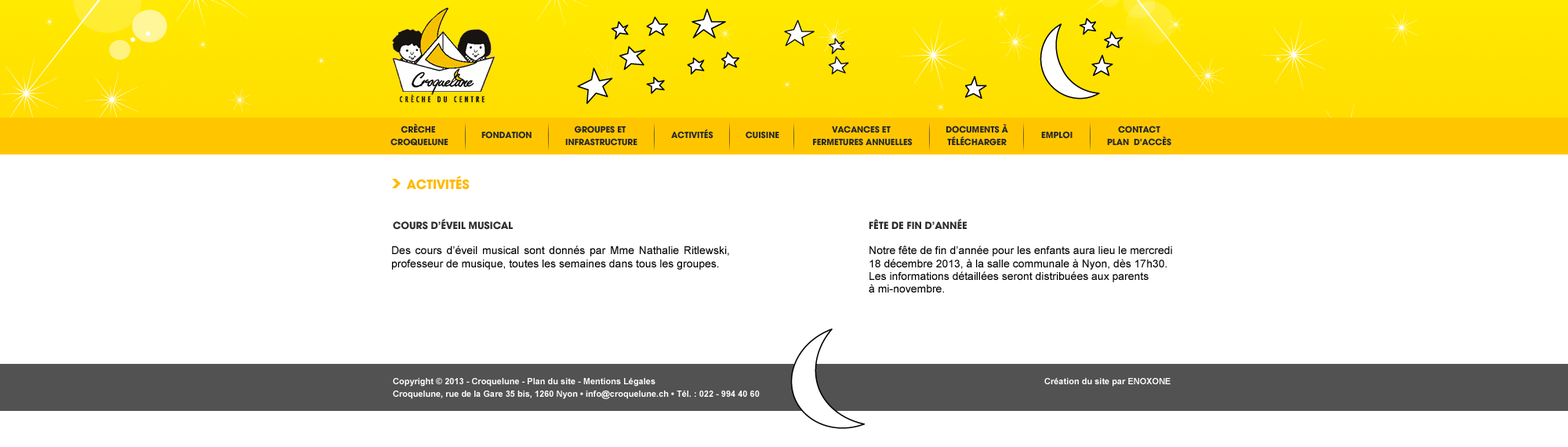
<style>
.page{position:relative;width:1568px;height:447px;background:#ffffff}
.page>*{position:absolute;margin:0}
.t1{font:9.4px/12.7px "AvantGard-Bold";color:#2a2a2a;text-transform:uppercase}
.t2{font:9.4px "AvantGard-Bold";color:#2a2a2a;text-transform:uppercase}
.t3{font:14.1px "AvantGard-Bold";color:#ffb900;text-transform:uppercase}
.t4{font:11px "AvantGard-Bold";color:#2f2f2f;text-transform:uppercase}
.t5{font:11px/12.7px "ArialMT";color:#000000}
.t6{font:8.6px/12.7px "Arial-BoldMT";color:#ffffff}
</style>
<div class="page">
<p class="t1" style="left:390px;top:123px;width:58px;height:23px;text-align:center">Crèche <br>Croquelune</p>
<p class="t1" style="left:565px;top:125px;width:72px;height:21px;text-align:center">Groupes et <br>infrastructure</p>
<p class="t1" style="left:813px;top:125px;width:100px;height:21px;text-align:center">Vacances et <br>fermetures annuelles</p>
<p class="t1" style="left:946px;top:124px;width:62px;height:22px;text-align:center">DOCUMENTs à<br>télécharger</p>
<p class="t1" style="left:1107px;top:125px;width:64px;height:21px;text-align:center">Contact<br>Plan  d'accès</p>
<p class="t2" style="left:481px;top:131px;width:51px;height:8px">Fondation</p>
<p class="t2" style="left:671px;top:129px;width:42px;height:10px">ACTIVITés</p>
<p class="t2" style="left:746px;top:131px;width:33px;height:8px">Cuisine</p>
<p class="t2" style="left:1041px;top:131px;width:32px;height:8px">Emploi</p>
<p class="t3" style="left:406px;top:176px;width:64px;height:14px">ACTIVITés</p>
<p class="t4" style="left:393px;top:219px;width:120px;height:11px">COURS D’ÉVEIL MUSICAL</p>
<p class="t4" style="left:869px;top:219px;width:98px;height:10px">FÊTE DE FIN D’ANNÉE</p>
<p class="t5" style="left:392px;top:245px;width:337px;height:25px;text-align:justify">Des cours d’éveil musical sont donnés par Mme Nathalie Ritlewski, professeur de musique, toutes les semaines dans tous les groupes.</p>
<p class="t5" style="left:869px;top:245px;width:303px;height:47px">Notre fête de fin d’année pour les enfants aura lieu le mercredi 18 décembre 2013, à la salle communale à Nyon, dès 17h30. Les informations détaillées seront distribuées aux parents <br>à mi-novembre.</p>
<p class="t6" style="left:393px;top:378px;width:778px;height:21px">Copyright © 2013 - Croquelune - Plan du site - Mentions Légales                                                             Création du site par ENOXONE<br>Croquelune, rue de la Gare 35 bis, 1260 Nyon • info@croquelune.ch • Tél. : 022 - 994 40 60</p>
</div>
